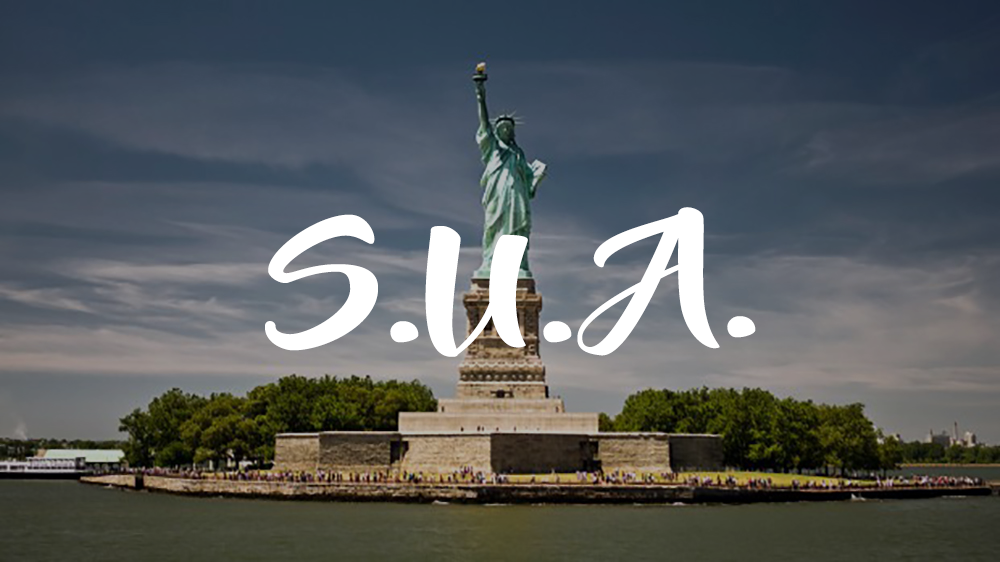
<style>
.page{position:relative;width:1000px;height:562px}
.page>*{position:absolute;margin:0}
.t1{font:130.6px "BeyondTheMountains";letter-spacing:0.01em;color:#ffffff;scale:1.25 1}
</style>
<div class="page">
<p class="t1" style="left:577px;top:207px;width:179px;height:149px">A.</p>
<p class="t1" style="left:265px;top:214px;width:307px;height:143px">S.U.</p>
</div>
